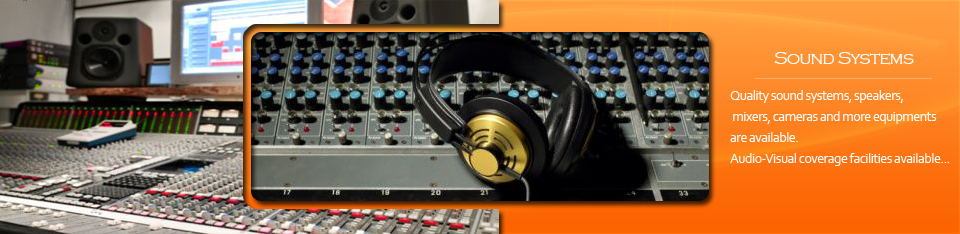
<style>
.page{position:relative;width:960px;height:234px}
.page>*{position:absolute;margin:0}
.t1{font:18px "CopperplateGothic-Light";letter-spacing:-0.04em;color:#fcfbfa}
.t2{font:14px/6.9px "Corbel";letter-spacing:-0.04em;color:#fcfbfa}
</style>
<div class="page">
<p class="t1" style="left:774px;top:52px;width:140px;height:13px">Sound Systems</p>
<p class="t2" style="left:730px;top:90px;width:220px;height:76px">Quality sound systems, speakers,<br><br><br> mixers, cameras and more equipments<br><br><br>are available.<br><br><br>Audio-Visual coverage facilities available...</p>
</div>
